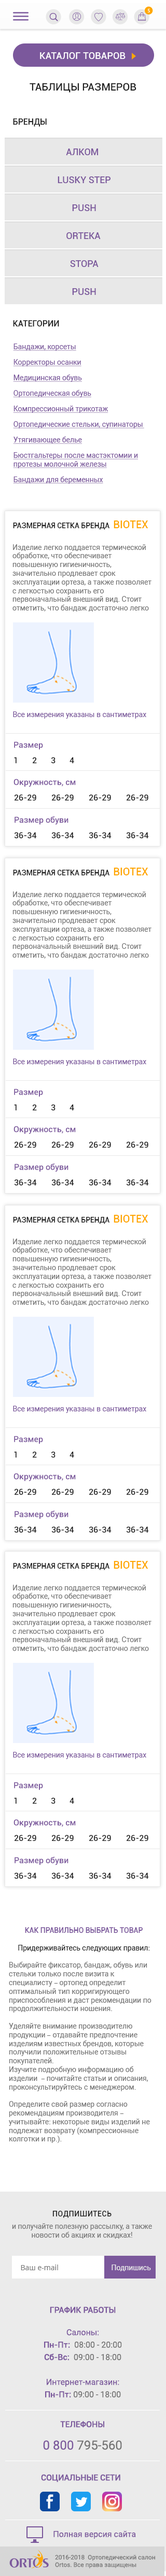
<style>
.page{position:relative;width:166px;height:2576px;background:#ffffff}
.page>*{position:absolute;margin:0}
.t1{font:5.3px "MyriadPro-Regular";letter-spacing:0.1em;color:#ffffff;text-transform:uppercase}
.t2{font:9.3px "Roboto-Medium";letter-spacing:0.01em;color:#ffffff;text-transform:uppercase}
.t3{font:10.3px "Roboto-Medium";color:#212121;text-transform:uppercase}
.t4{font:8.3px "Roboto-Medium";color:#212121;text-transform:uppercase}
.t5{font:9.3px "Roboto-Medium";letter-spacing:-0.002em;color:#7b589c;text-transform:uppercase}
.t6{font:7.2px/15.5px "Roboto-Regular";color:#7b589c;text-decoration:underline}
.t7{font:7.2px "Roboto-Regular";color:#7b589c;text-decoration:underline}
.t8{font:7.2px "Roboto-Medium";color:#212121;text-transform:uppercase}
.t9{font:10.3px "Roboto-Medium";color:#ffa700;text-transform:uppercase}
.t10{font:7.2px "Roboto-Regular";color:#757575}
.t11{font:7.2px "Roboto-Regular";color:#7b589c}
.t12{font:8.3px "Roboto-Medium";color:#7b589c}
.t13{font:8.3px "Roboto-Medium";color:#212121}
.t14{font:7.2px "Roboto-Medium";color:#7b589c;text-transform:uppercase}
.t15{font:7.2px "Roboto-Regular";color:#212121}
.t16{font:7.2px "MyriadPro-Regular";color:#757575}
.t17{font:7.2px/12.4px "Roboto-Regular";color:#757575}
.t18{font:7.2px "Roboto-Medium";letter-spacing:0.05em;color:#212121;text-transform:uppercase}
.t19{font:7.2px "OpenSans";color:#757575}
.t20{font:7.2px "Roboto-Regular";color:#ebebeb}
.t21{font:8.3px/12.4px "Roboto-Regular";color:#7b589c}
.t22{font:8.3px "Roboto-Medium";color:#7b589c;text-transform:uppercase}
.t23{font:8.3px/12.4px "Roboto-Medium";color:#7b589c}
.t24{font:8.3px/12.4px "Roboto-Regular";color:#757575}
.t25{font:12.4px/12.4px "Roboto-Regular";color:#7b589c}
.t26{font:12.4px/12.4px "Roboto-Regular";color:#757575}
.t27{font:8.3px "Roboto-Regular";color:#7b589c}
.t28{font:6.2px "Roboto-Regular";color:#757575}
</style>
<div class="page">
<p class="t1" style="left:147px;top:9px;width:3px;height:3px">5</p>
<p class="t2" style="left:40px;top:52px;width:85px;height:7px">Каталог товаров</p>
<p class="t3" style="left:29px;top:83px;width:107px;height:10px">Таблицы размеров</p>
<p class="t4" style="left:13px;top:118px;width:34px;height:9px">Бренды</p>
<p class="t5" style="left:66px;top:148px;width:32px;height:7px">Алком</p>
<p class="t5" style="left:57px;top:176px;width:53px;height:7px">Lusky Step</p>
<p class="t5" style="left:72px;top:204px;width:24px;height:7px">Push</p>
<p class="t5" style="left:66px;top:232px;width:34px;height:7px">orteka</p>
<p class="t5" style="left:70px;top:260px;width:28px;height:7px">stopa</p>
<p class="t5" style="left:72px;top:288px;width:24px;height:7px">Push</p>
<p class="t4" style="left:13px;top:320px;width:46px;height:6px">Категории</p>
<p class="t6" style="left:13px;top:344px;width:131px;height:140px">Бандажи, корсеты <br>Корректоры осанки <br>Медицинская обувь <br>Ортопедическая обувь<br>Компрессионный трикотаж Ортопедические стельки, супинаторы  Утягивающее белье<br>Бюстгальтеры после мастэктомии и <span class="t7">протезы молочной железы<br></span>Бандажи для беременных</p>
<p class="t8" style="left:13px;top:520px;width:135px;height:10px">Размерная сетка бренда  <span class="t9">Biotex</span></p>
<p class="t10" style="left:12px;top:544px;width:139px;height:68px">Изделие легко поддается термической обработке, что обеспечивает повышенную гигиеничность, значительно продлевает срок эксплуатации ортеза, а также позволяет с легкостью сохранить его первоначальный внешний вид. Стоит отметить, что бандаж достаточно легко одевать и сни</p>
<p class="t11" style="left:13px;top:711px;width:133px;height:8px">Все измерения указаны в сантиметрах</p>
<p class="t12" style="left:14px;top:741px;width:29px;height:9px">Размер</p>
<p class="t13" style="left:14px;top:757px;width:60px;height:7px">1 2 3 4</p>
<p class="t12" style="left:13px;top:779px;width:63px;height:8px">Окружность, см</p>
<p class="t13" style="left:14px;top:794px;width:134px;height:7px">26-29 26-29 26-29 26-29</p>
<p class="t12" style="left:14px;top:816px;width:54px;height:9px">Размер обуви</p>
<p class="t13" style="left:14px;top:832px;width:134px;height:7px">36-34 36-34 36-34 36-34</p>
<p class="t8" style="left:13px;top:868px;width:135px;height:9px">Размерная сетка бренда  <span class="t9">Biotex</span></p>
<p class="t10" style="left:12px;top:891px;width:139px;height:68px">Изделие легко поддается термической обработке, что обеспечивает повышенную гигиеничность, значительно продлевает срок эксплуатации ортеза, а также позволяет с легкостью сохранить его первоначальный внешний вид. Стоит отметить, что бандаж достаточно легко одевать и сни</p>
<p class="t11" style="left:13px;top:1059px;width:133px;height:7px">Все измерения указаны в сантиметрах</p>
<p class="t12" style="left:14px;top:1089px;width:29px;height:8px">Размер</p>
<p class="t13" style="left:14px;top:1104px;width:60px;height:7px">1 2 3 4</p>
<p class="t12" style="left:13px;top:1126px;width:63px;height:8px">Окружность, см</p>
<p class="t13" style="left:14px;top:1141px;width:134px;height:7px">26-29 26-29 26-29 26-29</p>
<p class="t12" style="left:14px;top:1163px;width:54px;height:9px">Размер обуви</p>
<p class="t13" style="left:14px;top:1179px;width:134px;height:7px">36-34 36-34 36-34 36-34</p>
<p class="t8" style="left:13px;top:1215px;width:135px;height:9px">Размерная сетка бренда  <span class="t9">Biotex</span></p>
<p class="t10" style="left:12px;top:1239px;width:139px;height:67px">Изделие легко поддается термической обработке, что обеспечивает повышенную гигиеничность, значительно продлевает срок эксплуатации ортеза, а также позволяет с легкостью сохранить его первоначальный внешний вид. Стоит отметить, что бандаж достаточно легко одевать и сни</p>
<p class="t11" style="left:13px;top:1406px;width:133px;height:7px">Все измерения указаны в сантиметрах</p>
<p class="t12" style="left:14px;top:1436px;width:29px;height:8px">Размер</p>
<p class="t13" style="left:14px;top:1451px;width:60px;height:7px">1 2 3 4</p>
<p class="t12" style="left:13px;top:1473px;width:63px;height:8px">Окружность, см</p>
<p class="t13" style="left:14px;top:1488px;width:134px;height:7px">26-29 26-29 26-29 26-29</p>
<p class="t12" style="left:14px;top:1510px;width:54px;height:9px">Размер обуви</p>
<p class="t13" style="left:14px;top:1526px;width:134px;height:7px">36-34 36-34 36-34 36-34</p>
<p class="t8" style="left:13px;top:1561px;width:135px;height:9px">Размерная сетка бренда  <span class="t9">Biotex</span></p>
<p class="t10" style="left:12px;top:1585px;width:139px;height:67px">Изделие легко поддается термической обработке, что обеспечивает повышенную гигиеничность, значительно продлевает срок эксплуатации ортеза, а также позволяет с легкостью сохранить его первоначальный внешний вид. Стоит отметить, что бандаж достаточно легко одевать и сни</p>
<p class="t11" style="left:13px;top:1752px;width:133px;height:7px">Все измерения указаны в сантиметрах</p>
<p class="t12" style="left:14px;top:1782px;width:29px;height:8px">Размер</p>
<p class="t13" style="left:14px;top:1797px;width:60px;height:7px">1 2 3 4</p>
<p class="t12" style="left:13px;top:1819px;width:63px;height:8px">Окружность, см</p>
<p class="t13" style="left:14px;top:1835px;width:134px;height:6px">26-29 26-29 26-29 26-29</p>
<p class="t12" style="left:14px;top:1856px;width:54px;height:9px">Размер обуви</p>
<p class="t13" style="left:14px;top:1872px;width:134px;height:7px">36-34 36-34 36-34 36-34</p>
<p class="t10" style="left:9px;top:1927px;width:142px;height:216px"><span class="t14">Как правильно выбрать товар<br><br></span><span class="t15">Придерживайтесь следующих правил:<br></span><br>Выбирайте фиксатор, бандаж, обувь или стельки только после визита к специалисту <span class="t16">–</span> ортопед определит оптимальный тип корригирующего приспособления и даст рекомендации по продолжительности ношения.<br><br>Уделяйте внимание производителю продукции <span class="t16">–</span> отдавайте предпочтение изделиям известных брендов, которые получили положительные отзывы покупателей.<br>Изучите подробную информацию об изделии  <span class="t16">–</span> почитайте статьи и описания, проконсультируйтесь с менеджером.<br><br>Определите свой размер согласно рекомендациям производителя <span class="t16">–</span> учитывайте: некоторые виды изделий не подлежат возврату (компрессионные колготки и пр.).</p>
<p class="t17" style="left:12px;top:2211px;width:140px;height:28px;text-align:center"><span class="t18">Подпишитесь <br></span>и получайте полезную рассылку, а также <span class="t10">новости об акциях и скидках!</span></p>
<p class="t19" style="left:21px;top:2265px;width:37px;height:5px">Ваш e-mail</p>
<p class="t20" style="left:111px;top:2265px;width:40px;height:6px">Подпишись</p>
<p class="t21" style="left:44px;top:2306px;width:78px;height:92px;text-align:center"><span class="t22">График работы<br><br></span>Салоны: <br><span class="t23">Пн-Пт:</span><span class="t24">  08:00 - 20:00 <br></span><span class="t23">Сб-Вс:</span><span class="t24">  09:00 - 18:00<br><br></span>Интернет-магазин:<br><span class="t23">Пн-Пт:</span><span class="t24"> 09:00 - 18:00</span></p>
<p class="t22" style="left:43px;top:2421px;width:79px;height:29px;text-align:center">Телефоны<br><br><span class="t25">0 800 </span><span class="t26">795-560</span></p>
<p class="t22" style="left:41px;top:2474px;width:79px;height:8px">Социальные сети</p>
<p class="t27" style="left:53px;top:2530px;width:83px;height:9px">Полная версия сайта</p>
<p class="t28" style="left:55px;top:2555px;width:100px;height:13px">2016-2018  Ортопедический салон Ortos. Все права защищены</p>
</div>
